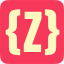
<style>
.page{position:relative;width:64px;height:64px;background:#f6385b}
.page>*{position:absolute;margin:0}
.t1{font:47px "Anton-Regular";color:#fcf8c0}
</style>
<div class="page">
<p class="t1" style="left:5px;top:9px;width:16px;height:47px">{</p>
<p class="t1" style="left:23px;top:11px;width:19px;height:41px">Z</p>
<p class="t1" style="left:44px;top:9px;width:16px;height:47px">}</p>
</div>
